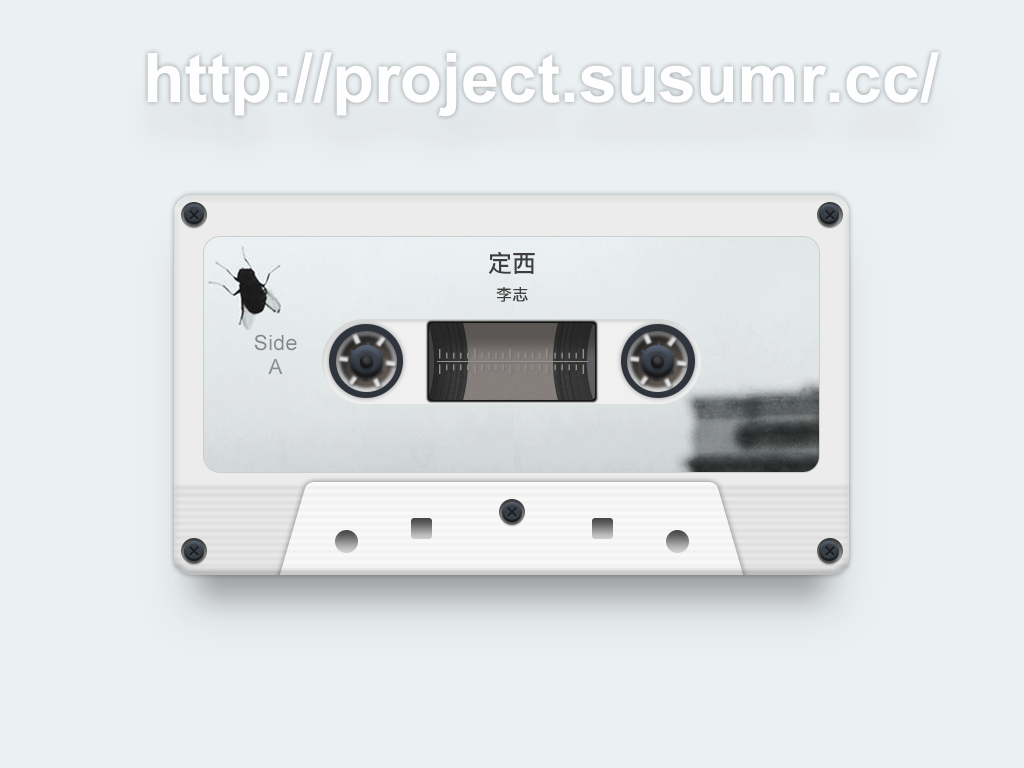
<style>
.page{position:relative;width:1024px;height:768px;background:#ebf0f3}
.page>*{position:absolute;margin:0}
.t1{font:68.2px "Arial-BoldMT";color:#ffffff}
.t2{font:24px "PingFangSC-Medium";color:#333333}
.t3{font:16px "PingFangSC-Regular";color:#333333;font-weight:bold}
.t4{font:21.1px "ArialMT";letter-spacing:0.02em;color:#808080}
.t5{font:21.1px "ArialMT";letter-spacing:0.02em;color:#858585}
</style>
<div class="page">
<p class="t1" style="left:147px;top:52px;width:792px;height:65px;opacity:0.94">http://project.susumr.cc/</p>
<p class="t2" style="left:488px;top:251px;width:47px;height:24px">定西</p>
<p class="t3" style="left:496px;top:287px;width:32px;height:15px">李志</p>
<p class="t4" style="left:254px;top:334px;width:43px;height:17px">Side</p>
<p class="t5" style="left:268px;top:359px;width:15px;height:15px">A</p>
</div>
